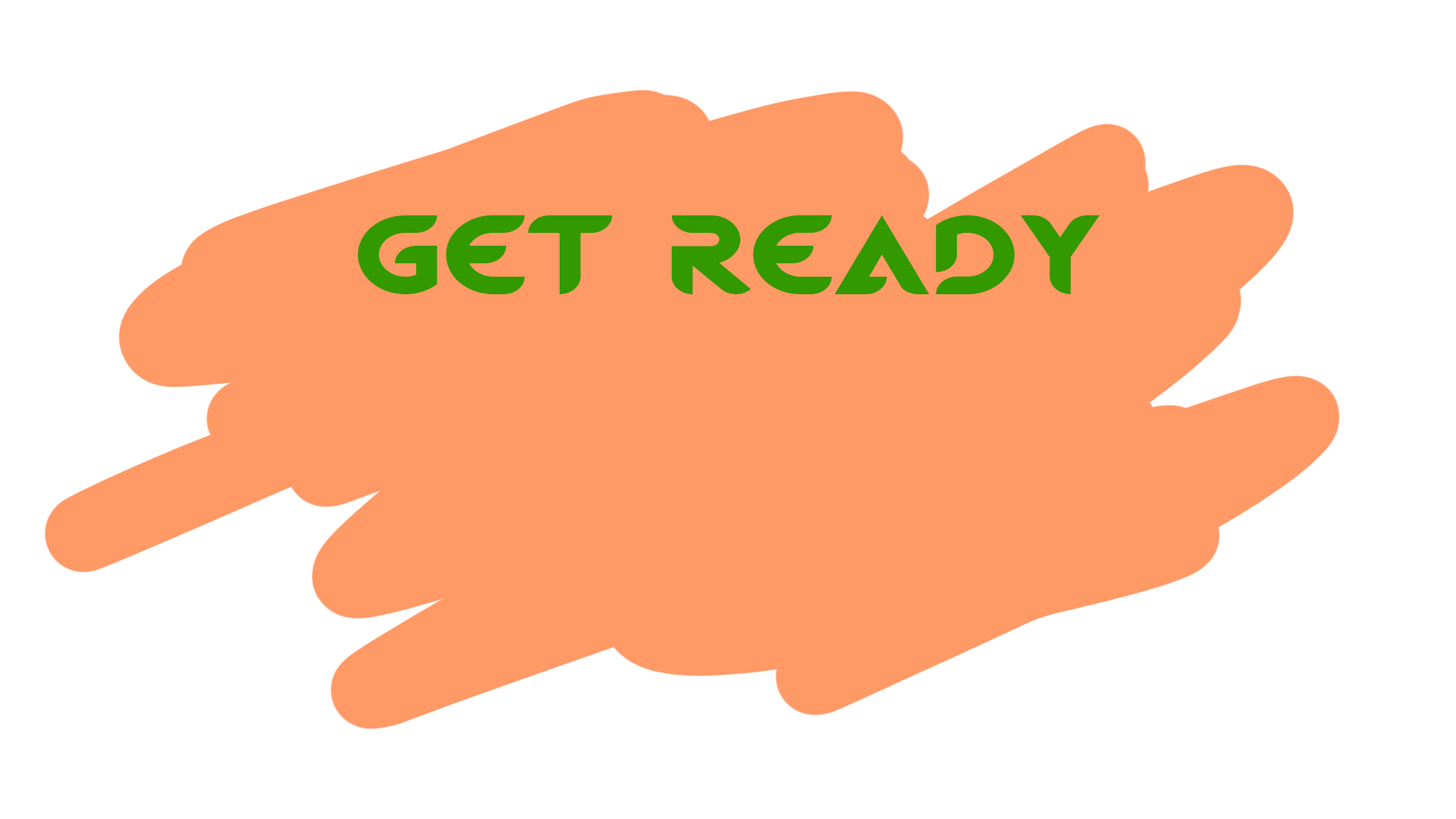
<style>
.page{position:relative;width:1456px;height:819px;background:#ffffff}
.page>*{position:absolute;margin:0}
.t1{font:109.7px "MagmawaveCaps-Bold";color:#339900;scale:1.2 1}
</style>
<div class="page">
<p class="t1" style="left:357px;top:215px;width:743px;height:80px">GET READY</p>
</div>
